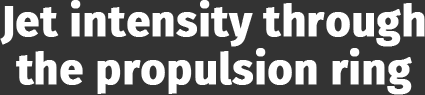
<style>
.page{position:relative;width:425px;height:95px;background:#333333}
.page>*{position:absolute;margin:0}
.t1{font:42.7px/48px "FiraSans-Bold";color:#ffffff;font-weight:bold}
</style>
<div class="page">
<p class="t1" style="left:0px;top:0px;width:425px;height:95px;text-align:center">Jet intensity through<br>the propulsion ring</p>
</div>
